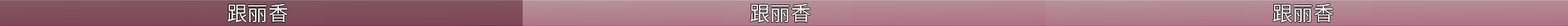
<style>
.page{position:relative;width:1568px;height:26px}
.page>*{position:absolute;margin:0}
.t1{font:20.6px "SourceHanSansSC-Normal";color:#ffffff}
</style>
<div class="page">
<p class="t1" style="left:227px;top:3px;width:60px;height:20px">跟丽香</p>
<p class="t1" style="left:750px;top:3px;width:60px;height:20px">跟丽香</p>
<p class="t1" style="left:1273px;top:3px;width:60px;height:20px">跟丽香</p>
</div>
